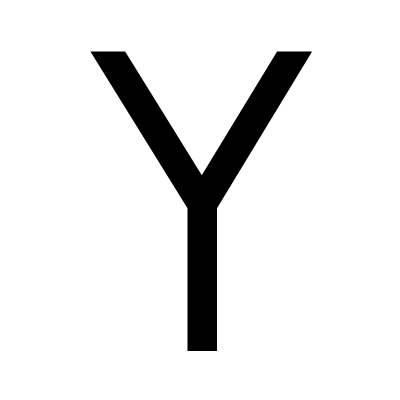
<style>
.page{position:relative;width:400px;height:400px;background:#ffffff}
.page>*{position:absolute;margin:0}
.t1{font:416.7px "CenturyGothic";color:#000000}
</style>
<div class="page">
<p class="t1" style="left:90px;top:51px;width:222px;height:300px">Y</p>
</div>
